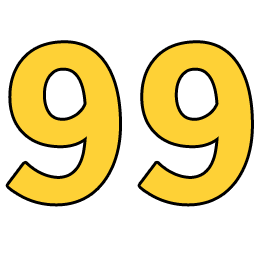
<style>
.page{position:relative;width:256px;height:256px;background:#ffffff}
.page>*{position:absolute;margin:0}
.t1{font:230px "Kreon-Bold";letter-spacing:0.03em;color:#fed136}
</style>
<div class="page">
<p class="t1" style="left:8px;top:43px;width:243px;height:161px">99</p>
</div>
